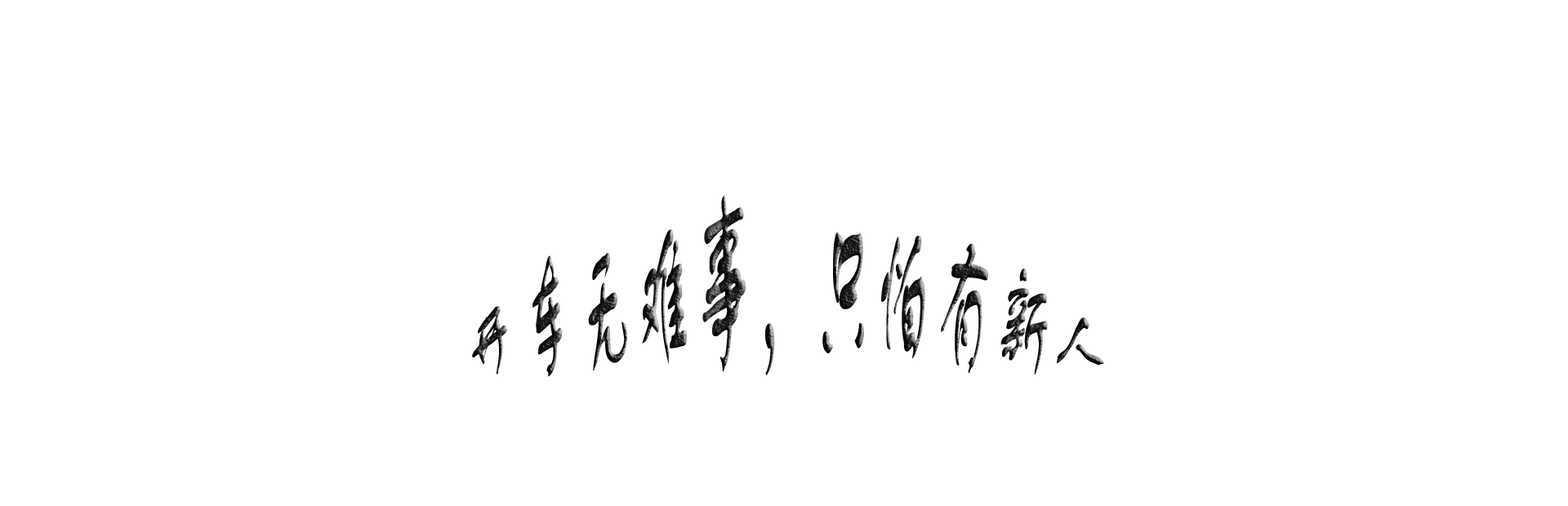
<style>
.page{position:relative;width:1568px;height:506px;background:#ffffff}
.page>*{position:absolute;margin:0}
.t1{font:58.8px "FZSTK--GBK1-0"}
</style>
<div class="page">
<p class="t1" style="left:472px;top:195px;width:632px;height:182px;text-align:center">开车无难事，只怕有新人</p>
</div>
